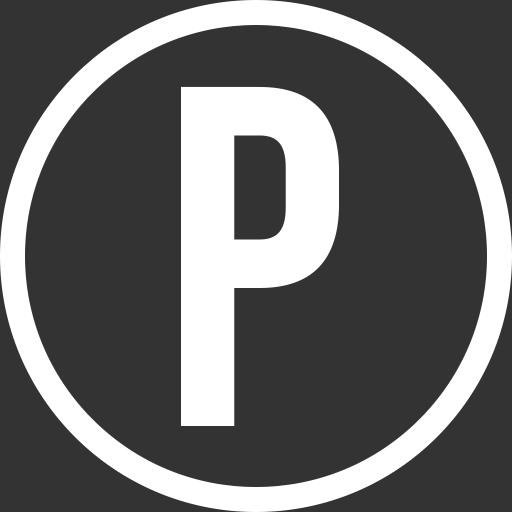
<style>
.page{position:relative;width:512px;height:512px;background:#333333}
.page>*{position:absolute;margin:0}
.t1{font:484.5px "BebasNeuePro-Bold";color:#ffffff}
</style>
<div class="page">
<p class="t1" style="left:181px;top:86px;width:158px;height:340px">P</p>
</div>
